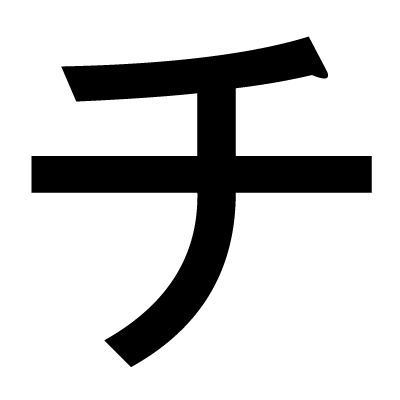
<style>
.page{position:relative;width:400px;height:400px;background:#ffffff}
.page>*{position:absolute;margin:0}
.t1{font:424.8px "MS-PGothic";color:#000000}
</style>
<div class="page">
<p class="t1" style="left:31px;top:36px;width:341px;height:331px">チ</p>
</div>
